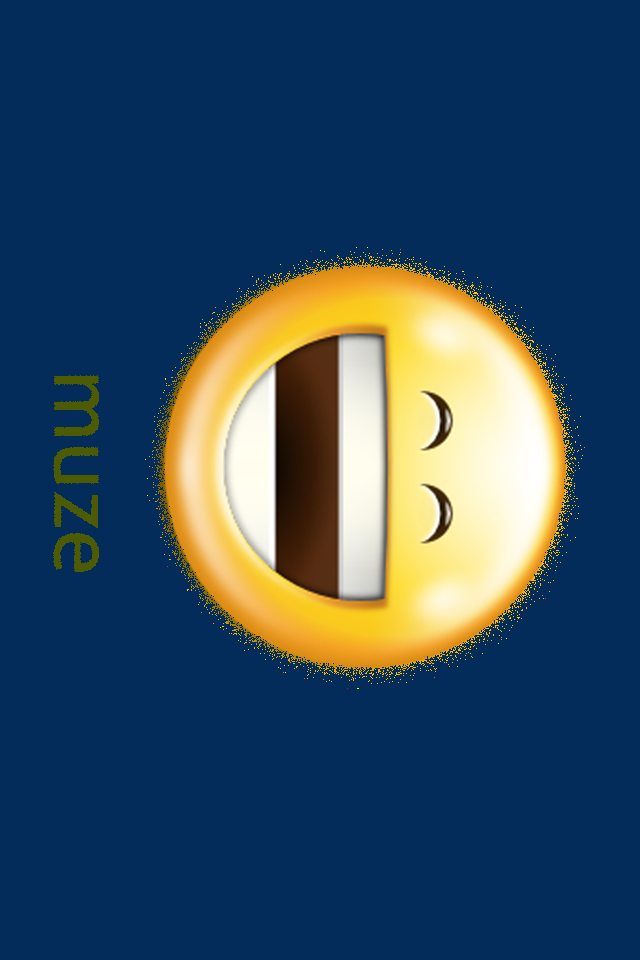
<style>
.page{position:relative;width:640px;height:960px;background:#042c5b}
.page>*{position:absolute;margin:0}
.t1{font:85px "Aller";color:#4c5b04}
</style>
<div class="page">
<p class="t1" style="left:53px;top:375px;width:46px;height:197px;rotate:90deg">muze</p>
</div>
